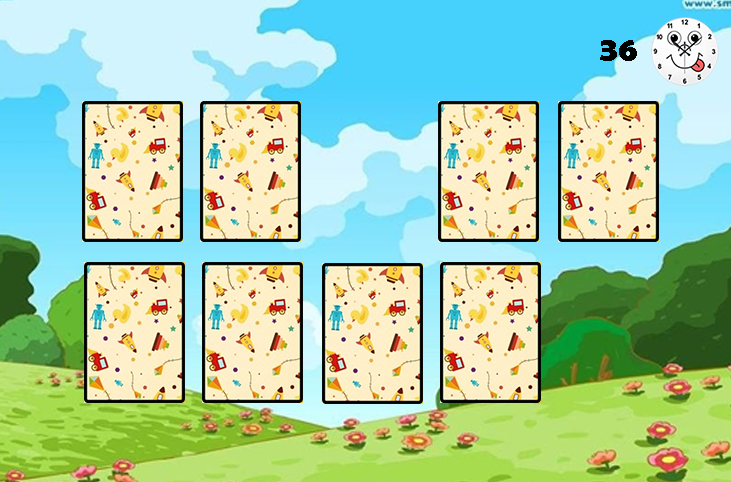
<style>
.page{position:relative;width:731px;height:482px}
.page>*{position:absolute;margin:0}
.t1{font:36px "BerlinSansFBDemi-Bold";color:#000000}
</style>
<div class="page">
<p class="t1" style="left:600px;top:40px;width:37px;height:21px">36</p>
</div>
